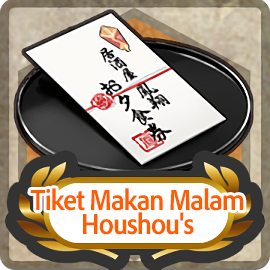
<style>
.page{position:relative;width:270px;height:270px}
.page>*{position:absolute;margin:0}
.t1{font:30px/24px "AdobeClean-Bold";letter-spacing:-0.04em;color:#ff5d00;scale:0.9 1}
</style>
<div class="page">
<p class="t1" style="left:30px;top:188px;width:214px;height:47px;text-align:center">Tiket Makan Malam<br>Houshou's</p>
</div>
